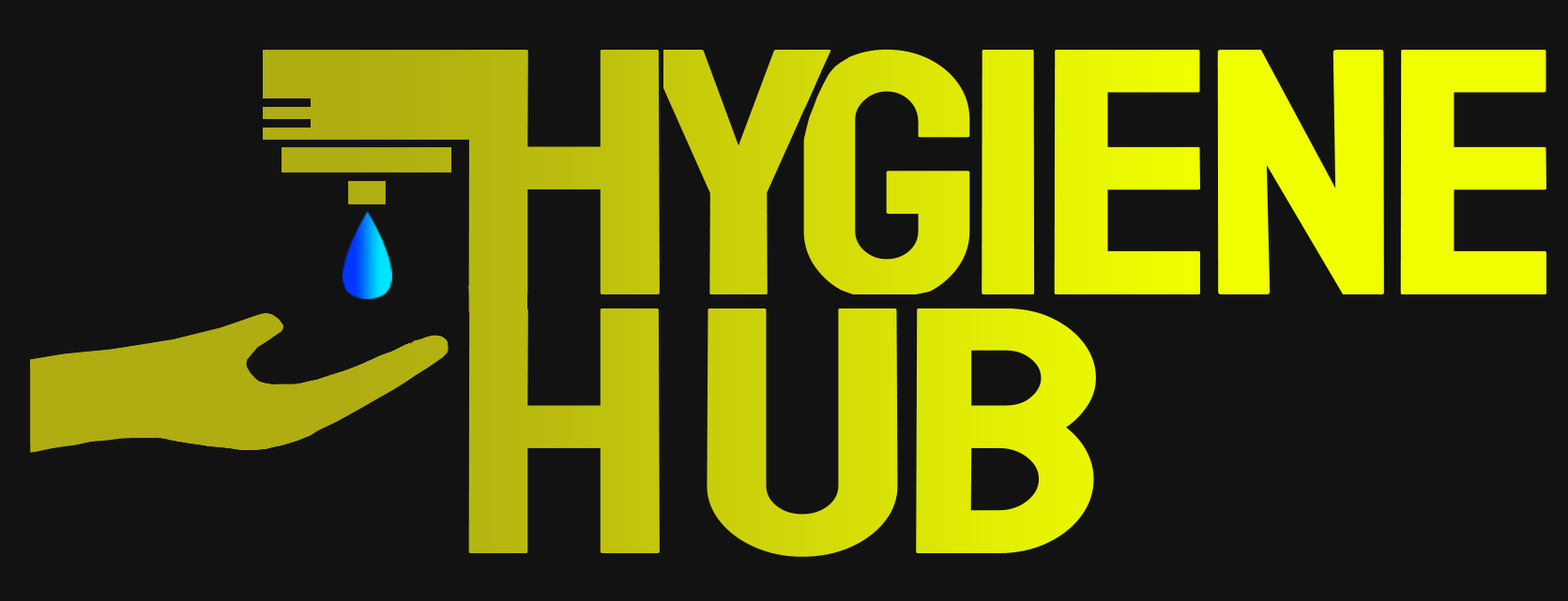
<style>
.page{position:relative;width:1568px;height:601px;background:#121212}
.page>*{position:absolute;margin:0}
.t1{font:351.9px "Staatliches-Regular";color:#bcbd0e;scale:1.38 1}
.t2{font:351.9px "Staatliches-Regular";color:#e4ef03;scale:1.22 1}
.t3{font:351.9px "Staatliches-Regular";color:#eaf802;scale:1.25 1}
.t4{font:351.9px "Staatliches-Regular";color:#f0ff00;scale:1.25 1}
.t5{font:351.9px "Staatliches-Regular";color:#d1d808;scale:1.38 1}
.t6{font:351.9px "Staatliches-Regular";color:#e2ee04;scale:1.29 1}
</style>
<div class="page">
<p class="t1" style="left:468px;top:50px;width:192px;height:245px">H</p>
<p class="t2" style="left:982px;top:50px;width:53px;height:245px">I</p>
<p class="t3" style="left:1054px;top:50px;width:146px;height:245px">E</p>
<p class="t4" style="left:1217px;top:50px;width:167px;height:245px">N</p>
<p class="t4" style="left:1400px;top:50px;width:146px;height:245px">E</p>
<p class="t1" style="left:468px;top:309px;width:192px;height:245px">H</p>
<p class="t5" style="left:707px;top:309px;width:191px;height:248px">U</p>
<p class="t6" style="left:916px;top:309px;width:180px;height:245px">B</p>
</div>
